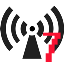
<style>
.page{position:relative;width:64px;height:64px;background:#ffffff}
.page>*{position:absolute;margin:0}
.t1{font:46.7px "System";color:#f91232}
</style>
<div class="page">
<p class="t1" style="left:43px;top:32px;width:18px;height:30px">7</p>
</div>
